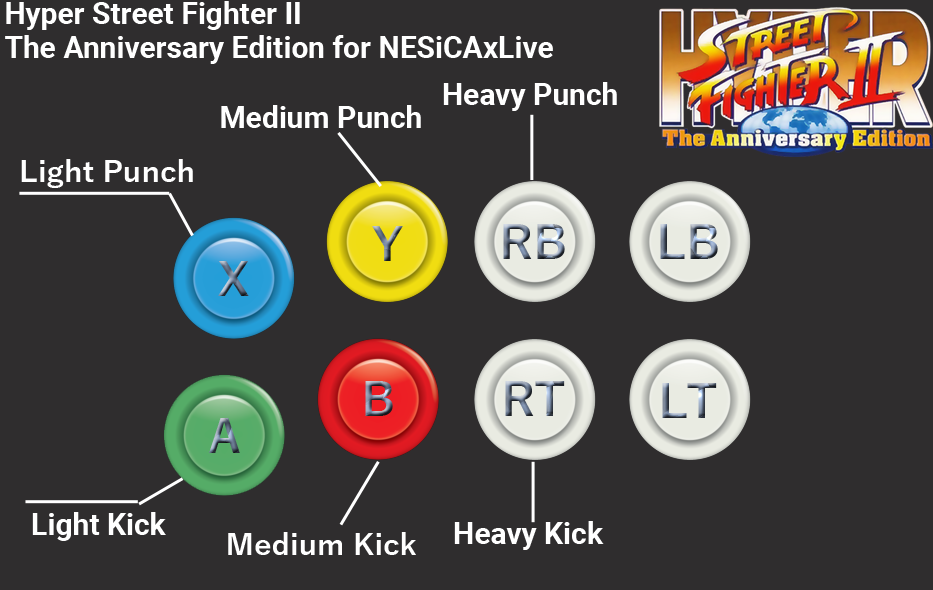
<style>
.page{position:relative;width:933px;height:590px;background:#2f2d2e}
.page>*{position:absolute;margin:0}
.t1{font:30px/34px "Roboto-Bold";color:#ffffff}
.t2{font:30px "Roboto-Bold";color:#ffffff}
.t3{font:30px "YuGothic-Bold";color:#ffffff}
</style>
<div class="page">
<p class="t1" style="left:5px;top:1px;width:548px;height:63px">Hyper Street Fighter II<br>The Anniversary Edition for NESiCAxLive</p>
<p class="t2" style="left:443px;top:82px;width:174px;height:29px">Heavy Punch</p>
<p class="t2" style="left:221px;top:105px;width:200px;height:23px">Medium Punch</p>
<p class="t3" style="left:21px;top:159px;width:172px;height:29px">Light Punch</p>
<p class="t2" style="left:32px;top:512px;width:134px;height:29px">Light Kick</p>
<p class="t2" style="left:454px;top:521px;width:150px;height:29px">Heavy Kick</p>
<p class="t3" style="left:228px;top:532px;width:188px;height:23px">Medium Kick</p>
</div>
